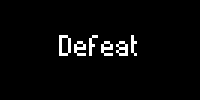
<style>
.page{position:relative;width:200px;height:100px;background:#000000}
.page>*{position:absolute;margin:0}
.t1{font:48px "Thintel";color:#ffffff}
</style>
<div class="page">
<p class="t1" style="left:59px;top:35px;width:78px;height:21px">Defeat</p>
</div>
